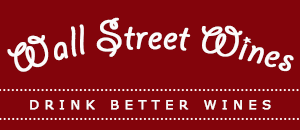
<style>
.page{position:relative;width:300px;height:130px;background:#83040b}
.page>*{position:absolute;margin:0}
.t1{font:46px "GiddyupStd";color:#fcfbfb;font-weight:bold}
.t2{font:13px "Verdana";letter-spacing:0.41em;color:#fcfbfb;text-transform:uppercase;font-weight:bold}
</style>
<div class="page">
<p class="t1" style="left:7px;top:17px;width:287px;height:55px">Wall Street Wines</p>
<p class="t2" style="left:30px;top:100px;width:241px;height:10px">Drink Better Wines</p>
</div>
